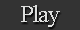
<style>
.page{position:relative;width:80px;height:30px;background:#333333}
.page>*{position:absolute;margin:0}
.t1{font:24px "TimesNewRomanPSMT";letter-spacing:-0.04em;color:#dddedd}
</style>
<div class="page">
<p class="t1" style="left:21px;top:5px;width:39px;height:22px">Play</p>
</div>
